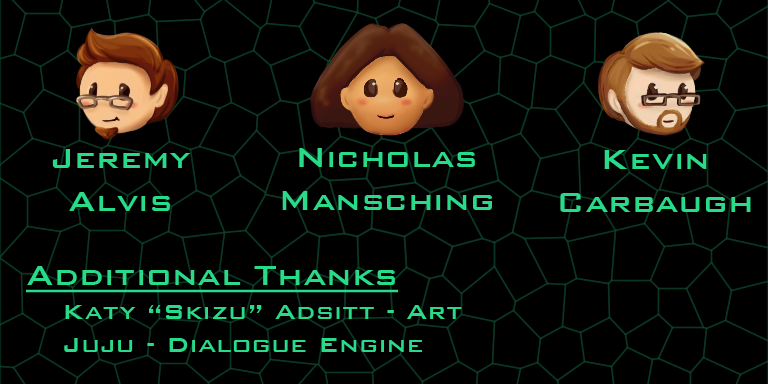
<style>
.page{position:relative;width:768px;height:384px;background:#000000}
.page>*{position:absolute;margin:0}
.t1{font:36px "BankGothicBT-Medium";color:#29da89}
.t2{font:28px "BankGothicBT-Medium";color:#29da89}
.t3{font:36px "BankGothicBT-Medium";color:#29da89;text-decoration:underline}
</style>
<div class="page">
<p class="t1" style="left:52px;top:149px;width:139px;height:62px;text-align:center">Jeremy<br>Alvis</p>
<p class="t1" style="left:282px;top:148px;width:210px;height:62px;text-align:center">Nicholas<br>Mansching</p>
<p class="t1" style="left:560px;top:150px;width:191px;height:62px;text-align:center">Kevin<br>Carbaugh</p>
<p class="t2" style="left:26px;top:266px;width:436px;height:86px"><span class="t3">Additional Thanks<br></span> Katy “Skizu” Adsitt - Art<br> Juju - Dialogue Engine</p>
</div>
